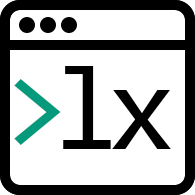
<style>
.page{position:relative;width:195px;height:195px;background:#ffffff}
.page>*{position:absolute;margin:0}
.t1{font:120.8px "Consolas";color:#000000}
.t2{font:120.8px "Consolas";color:#059a7c}
</style>
<div class="page">
<p class="t1" style="left:63px;top:66px;width:48px;height:83px">l</p>
<p class="t2" style="left:14px;top:79px;width:47px;height:66px">&gt;</p>
<p class="t1" style="left:112px;top:90px;width:59px;height:59px">x</p>
</div>
